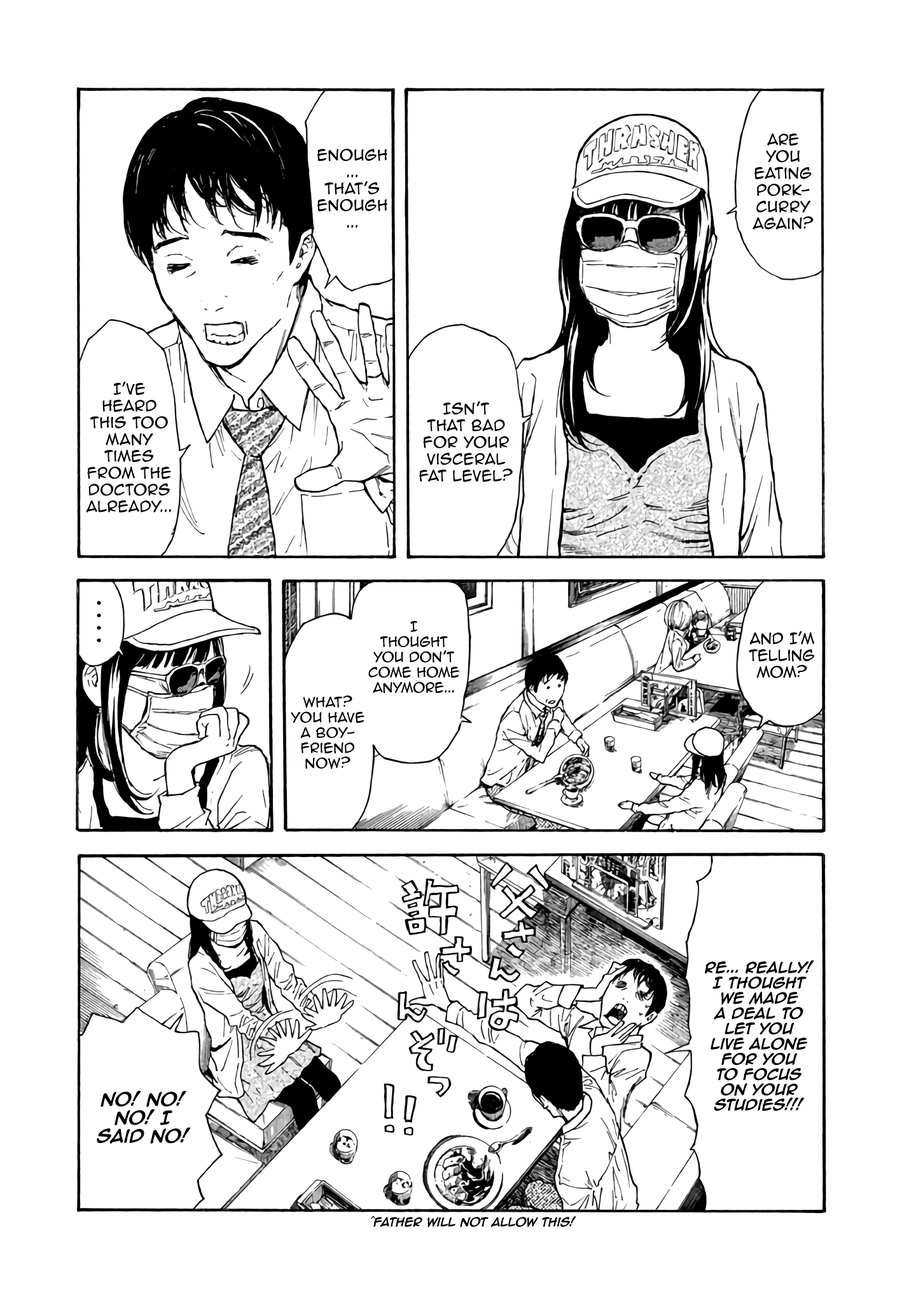
<style>
.page{position:relative;width:916px;height:1302px;background:#ffffff}
.page>*{position:absolute;margin:0}
.t1{font:14px "AnimeAce2.0BB";color:#000000}
.t2{font:12.7px "AnimeAce2.0BB";color:#000000}
.t3{font:12.7px "AnimeAce2.0BB-Bold";color:#000000}
.t4{font:15.3px "AnimeAce2.0BB-Bold";color:#000000}
.t5{font:10.2px "AnimeAce2.0BB-Bold";color:#000000}
</style>
<div class="page">
<p class="t1" style="left:752px;top:134px;width:61px;height:96px;text-align:center">Are <br>you eating pork-<br>curry again?</p>
<p class="t1" style="left:317px;top:149px;width:70px;height:79px;text-align:center">Enough... That’s enough...</p>
<p class="t1" style="left:86px;top:382px;width:85px;height:131px;text-align:center">I’ve <br>heard this too many times from the doctors already...</p>
<p class="t1" style="left:419px;top:401px;width:94px;height:81px;text-align:center">Isn’t that bad for your visceral fat level?</p>
<p class="t2" style="left:368px;top:621px;width:91px;height:73px;text-align:center">I <br>thought you don’t come home anymore...</p>
<p class="t1" style="left:748px;top:631px;width:66px;height:47px;text-align:center">and I’m telling mom?</p>
<p class="t2" style="left:291px;top:696px;width:73px;height:73px;text-align:center">What? you have a boy-<br>friend now?</p>
<p class="t3" style="left:705px;top:960px;width:109px;height:152px;text-align:center">Re... Really! I thought we made a deal to let you live alone for you to focus on your studies!!!</p>
<p class="t4" style="left:97px;top:1091px;width:94px;height:53px;text-align:center">NO! no! no! I said no!</p>
<p class="t5" style="left:371px;top:1216px;width:205px;height:12px">^Father will not allow this!</p>
</div>
